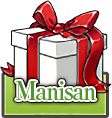
<style>
.page{position:relative;width:112px;height:118px;background:#ffffff}
.page>*{position:absolute;margin:0}
.t1{font:25px "RyuminPro-ExBold";letter-spacing:-0.08em;color:#4f9626;scale:0.9 1}
</style>
<div class="page">
<p class="t1" style="left:16px;top:81px;width:80px;height:20px">Manisan</p>
</div>
